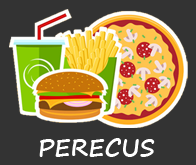
<style>
.page{position:relative;width:196px;height:165px;background:#333333}
.page>*{position:absolute;margin:0}
.t1{font:24px "SegoePrint-Bold";color:#ffffff;text-transform:uppercase}
</style>
<div class="page">
<p class="t1" style="left:39px;top:138px;width:116px;height:19px">PEREcUS</p>
</div>
